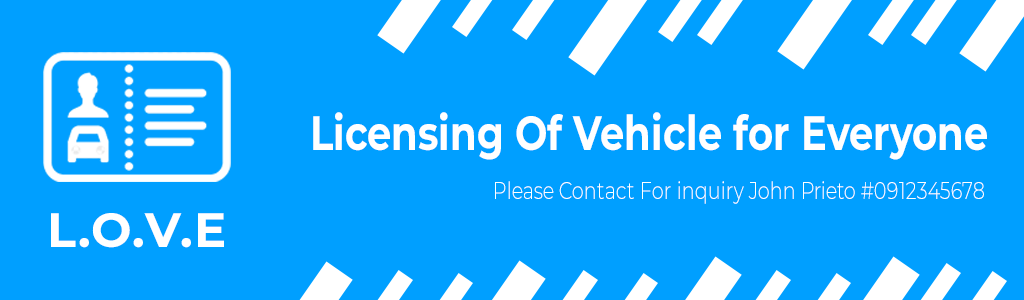
<style>
.page{position:relative;width:1024px;height:300px;background:#009fff}
.page>*{position:absolute;margin:0}
.t1{font:48px "Montserrat-Bold";color:#ffffff;scale:0.8 1}
.t2{font:24px "Montserrat-Light";color:#ffffff;scale:0.8 1}
.t3{font:48px "Montserrat-Bold";letter-spacing:0.025em;color:#ffffff}
</style>
<div class="page">
<p class="t1" style="left:313px;top:112px;width:674px;height:48px">Licensing Of Vehicle for Everyone</p>
<p class="t2" style="left:495px;top:181px;width:489px;height:23px">Please Contact For inquiry John Prieto #0912345678</p>
<p class="t3" style="left:51px;top:213px;width:173px;height:35px">L.O.V.E</p>
</div>
